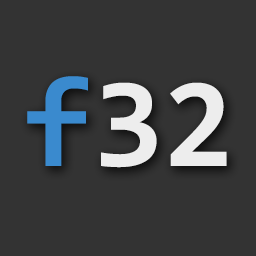
<style>
.page{position:relative;width:256px;height:256px;background:#333333}
.page>*{position:absolute;margin:0}
.t1{font:128px "Consolas-Bold";color:#ededed}
.t2{font:128px "Consolas-Bold";color:#3a8ace}
</style>
<div class="page">
<p class="t1" style="left:27px;top:76px;width:200px;height:92px"><span class="t2">f</span>32</p>
</div>
